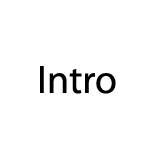
<style>
.page{position:relative;width:150px;height:150px;background:#ffffff}
.page>*{position:absolute;margin:0}
.t1{font:40px "MyriadPro-Regular";color:#000000}
</style>
<div class="page">
<p class="t1" style="left:40px;top:66px;width:76px;height:28px">Intro</p>
</div>
